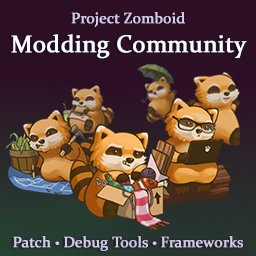
<style>
.page{position:relative;width:256px;height:256px}
.page>*{position:absolute;margin:0}
.t1{font:24px "Constantia";color:#ffffff;font-weight:bold}
.t2{font:15px "Constantia";color:#d5cbe6;font-weight:bold}
.t3{font:15px "MyriadPro-Regular";color:#d5cbe6;font-weight:bold}
</style>
<div class="page">
<p class="t1" style="left:11px;top:12px;width:236px;height:47px;text-align:center"><span class="t2">Project Zomboid<br></span>Modding Community</p>
<p class="t2" style="left:13px;top:236px;width:230px;height:15px">Patch <span class="t3">• </span>Debug Tools <span class="t3">• </span>Frameworks</p>
</div>
